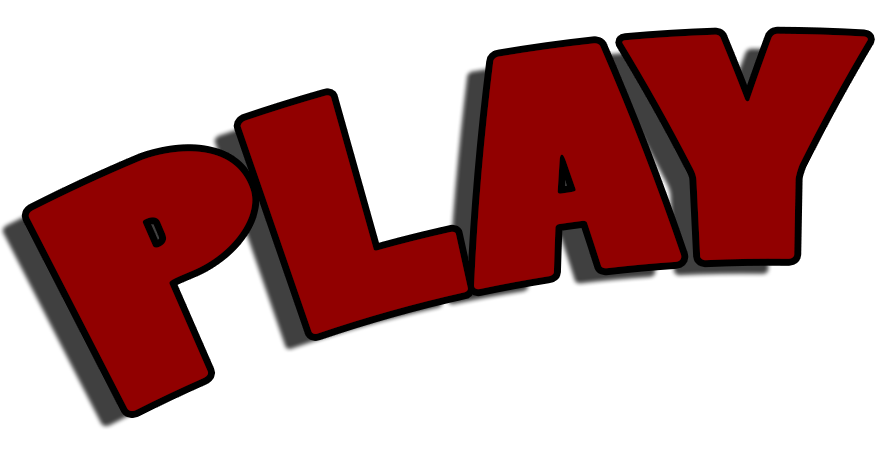
<style>
.page{position:relative;width:891px;height:449px;background:#ffffff}
.page>*{position:absolute;margin:0}
.t1{font:300px "PoplarStd";color:#910000}
</style>
<div class="page">
<p class="t1" style="left:28px;top:33px;width:840px;height:378px;rotate:-12deg">PLAY</p>
</div>
